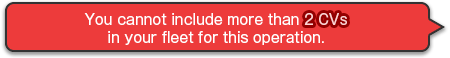
<style>
.page{position:relative;width:450px;height:58px;background:#ed3b3b}
.page>*{position:absolute;margin:0}
.t1{font:14px/18px "GothicMB101Pro-Regular";color:#ffffff}
.t2{font:14px/18px "GothicMB101Pro-Regular";color:#ffd3d3}
</style>
<div class="page">
<p class="t1" style="left:84px;top:13px;width:263px;height:32px;text-align:center">You cannot include more than <span class="t2">2 CVs<br></span>in your fleet for this operation.</p>
<p class="t1" style="left:84px;top:13px;width:263px;height:32px;text-align:center">You cannot include more than <span class="t2">2 CVs<br></span>in your fleet for this operation.</p>
</div>
